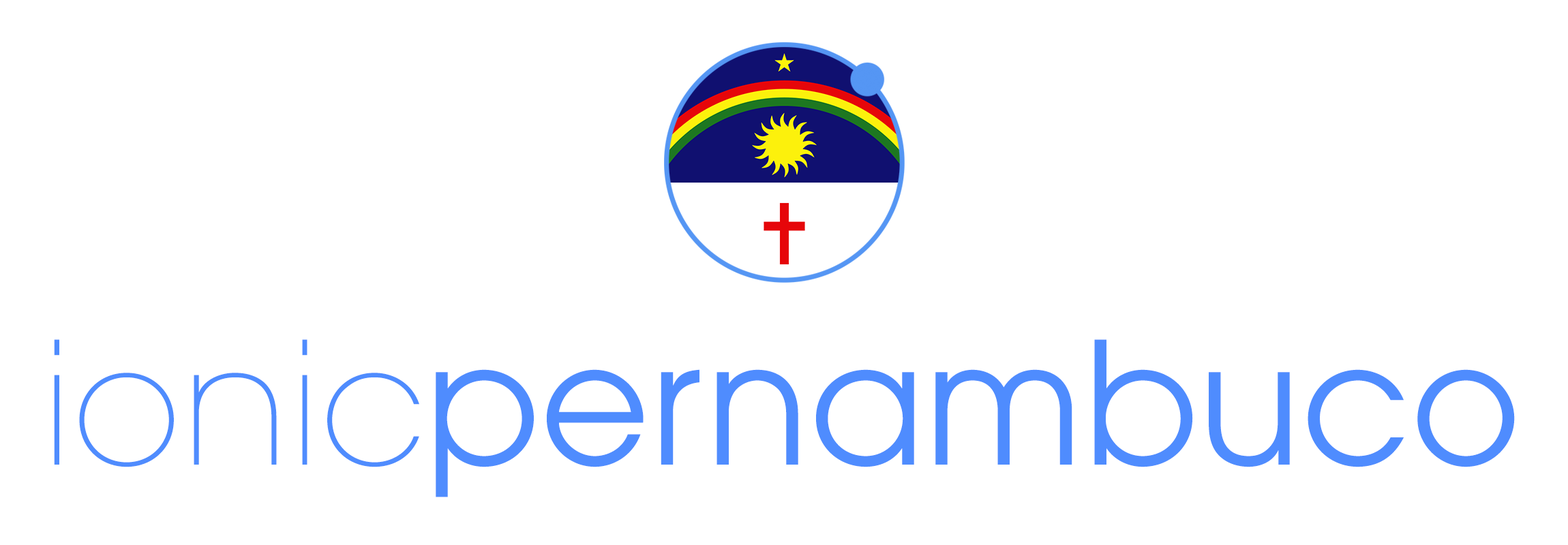
<style>
.page{position:relative;width:1568px;height:545px;background:#ffffff}
.page>*{position:absolute;margin:0}
.t1{font:168.8px "ITCAvantGardePro-Bk";color:#4f8cfe}
.t2{font:168.8px "ITCAvantGardePro-XLt";color:#4f8cfe}
</style>
<div class="page">
<p class="t1" style="left:54px;top:340px;width:1461px;height:158px"><span class="t2">ionic</span>pernambuco</p>
</div>
